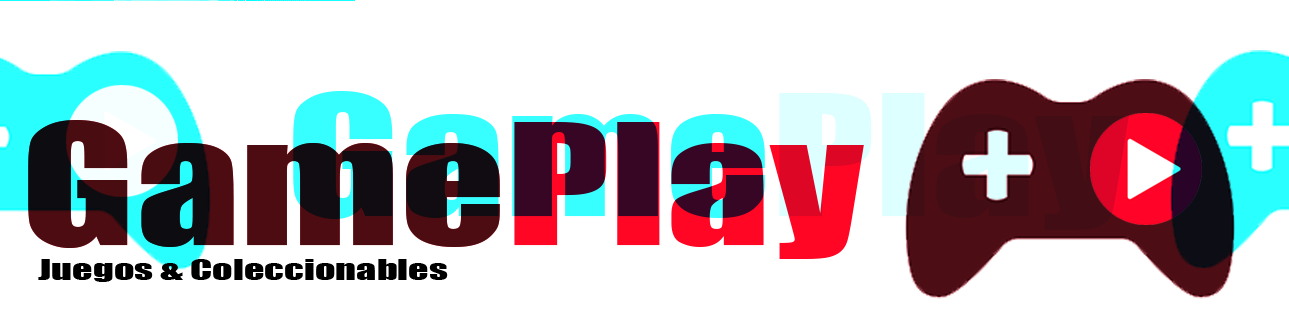
<style>
.page{position:relative;width:1289px;height:319px;background:#ffffff}
.page>*{position:absolute;margin:0}
.t1{font:155.4px "Impact";scale:1.33 1}
</style>
<div class="page">
<p class="t1" style="left:28px;top:91px;width:836px;height:139px">GamePlay</p>
</div>
